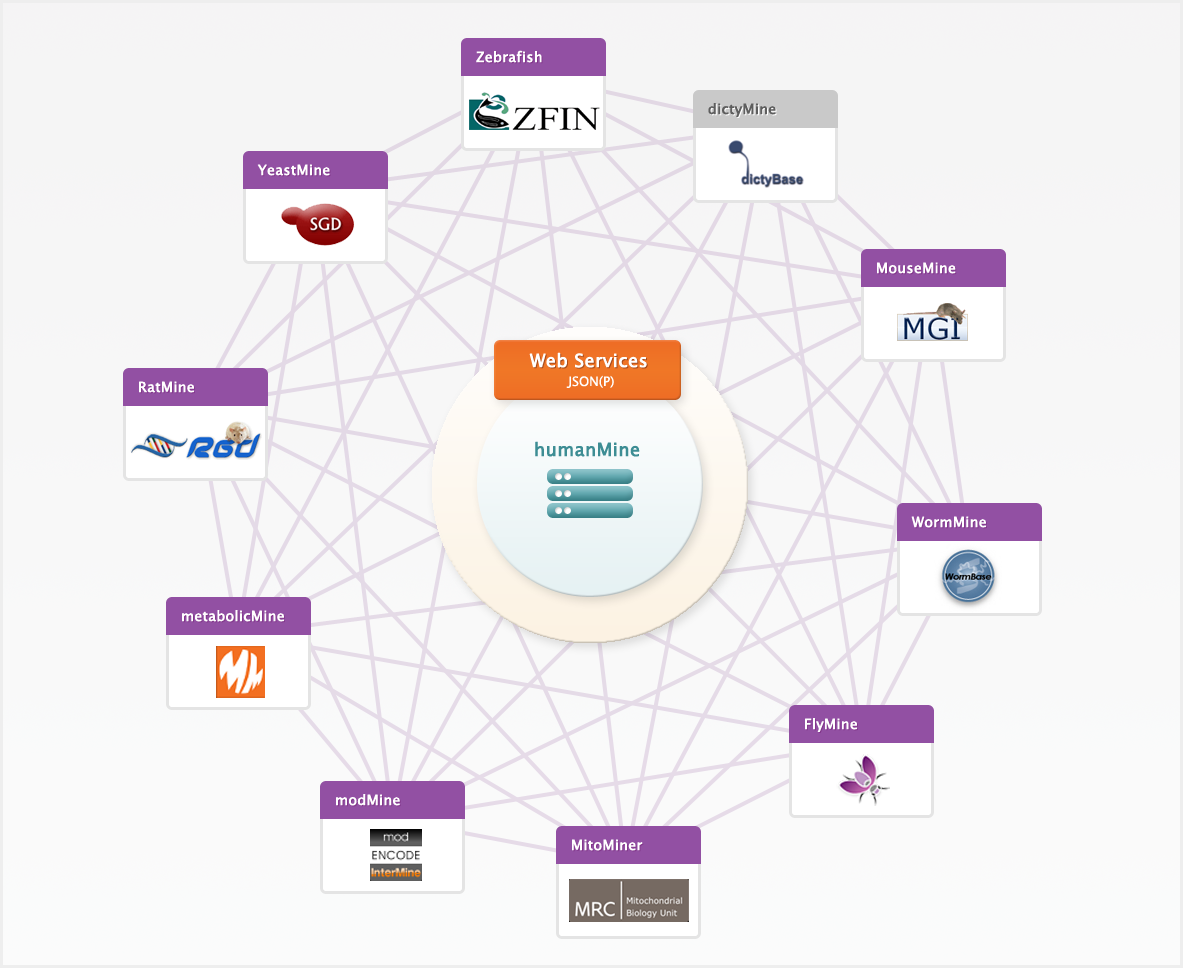
<style>
.page{position:relative;width:1183px;height:968px}
.page>*{position:absolute;margin:0}
.t1{font:14px "LucidaGrande";color:#ffffff;font-weight:bold}
.t2{font:14px "LucidaGrande";color:#5d5d5e;font-weight:bold}
.t3{font:18px "LucidaGrande";color:#ffffff;font-weight:bold}
.t4{font:18px "LucidaGrande";font-weight:bold}
.t5{font:13px "LucidaGrande";color:#ffffff}
.t6{font:18px "LucidaGrande";color:#3d8d94;font-weight:bold}
</style>
<div class="page">
<p class="t1" style="left:476px;top:50px;width:66px;height:13px">Zebrafish</p>
<p class="t2" style="left:708px;top:103px;width:68px;height:14px">dictyMine</p>
<p class="t1" style="left:257px;top:164px;width:73px;height:12px">YeastMine</p>
<p class="t1" style="left:877px;top:262px;width:79px;height:12px">MouseMine</p>
<p class="t3" style="left:529px;top:352px;width:118px;height:16px">Web Services</p>
<p class="t4" style="left:530px;top:353px;width:118px;height:16px">Web Services</p>
<p class="t5" style="left:566px;top:375px;width:48px;height:13px">JSON(P)</p>
<p class="t1" style="left:139px;top:381px;width:55px;height:12px">RatMine</p>
<p class="t6" style="left:535px;top:441px;width:105px;height:16px">humanMine</p>
<p class="t1" style="left:911px;top:516px;width:75px;height:12px">WormMine</p>
<p class="t1" style="left:182px;top:610px;width:102px;height:12px">metabolicMine</p>
<p class="t1" style="left:805px;top:718px;width:52px;height:14px">FlyMine</p>
<p class="t1" style="left:336px;top:794px;width:64px;height:12px">modMine</p>
<p class="t1" style="left:572px;top:839px;width:71px;height:12px">MitoMiner</p>
</div>
